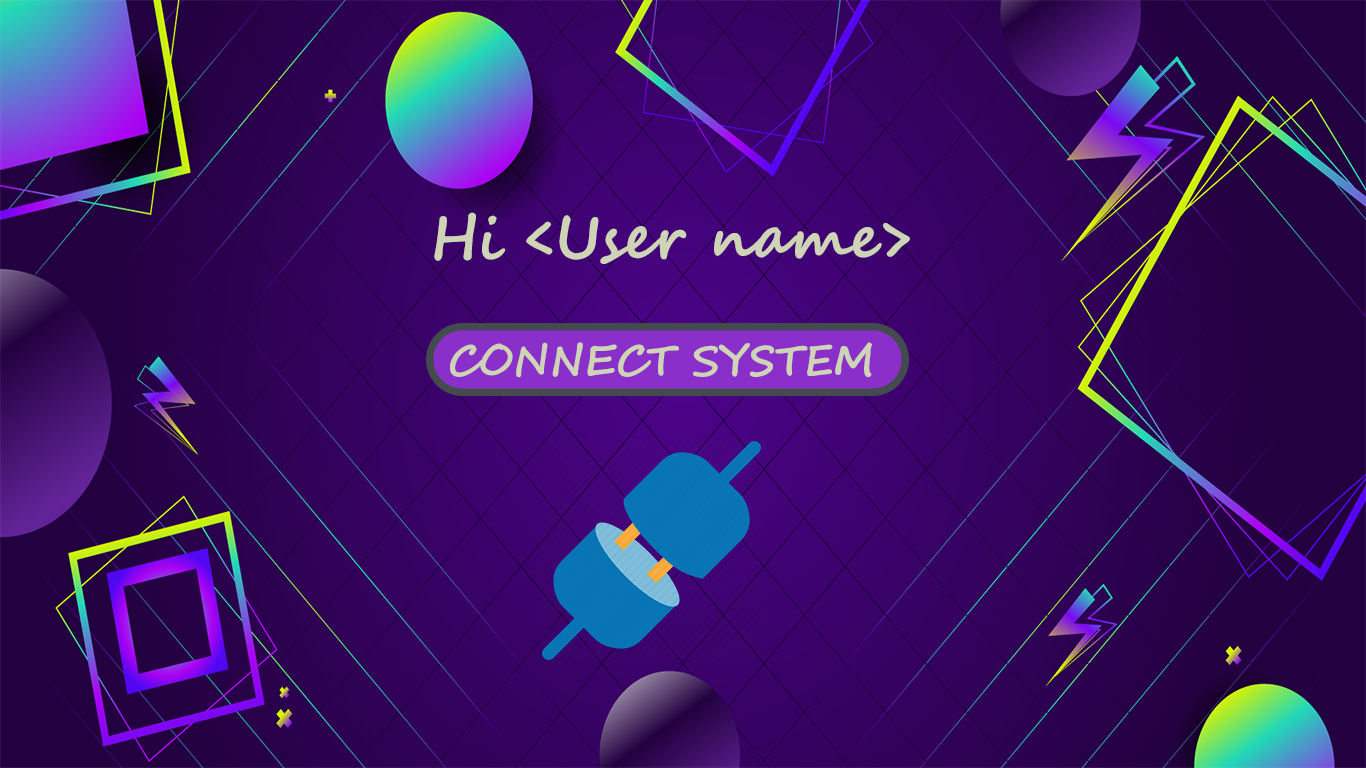
<style>
.page{position:relative;width:1366px;height:768px}
.page>*{position:absolute;margin:0}
.t1{font:58.3px "SegoeScript-Bold";color:#ced4b5}
.t2{font:41.7px "SegoeScript-Bold";color:#ced4b5}
</style>
<div class="page">
<p class="t1" style="left:434px;top:212px;width:476px;height:52px">Hi &lt;User name&gt;</p>
<p class="t2" style="left:450px;top:342px;width:422px;height:36px">CONNECT SYSTEM</p>
</div>
